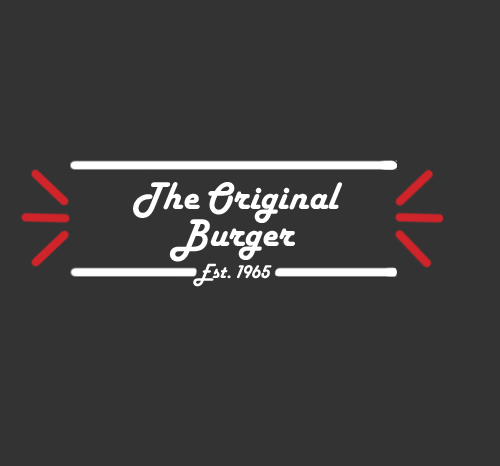
<style>
.page{position:relative;width:500px;height:466px;background:#333333}
.page>*{position:absolute;margin:0}
.t1{font:40px "HarlowSolidLetPlain";color:#ffffff}
.t2{font:21.3px "HarlowSolidLetPlain";color:#ffffff}
</style>
<div class="page">
<p class="t1" style="left:133px;top:182px;width:209px;height:41px">The Original</p>
<p class="t1" style="left:169px;top:219px;width:126px;height:43px">Burger</p>
<p class="t2" style="left:193px;top:263px;width:79px;height:24px">Est. 1965</p>
</div>
